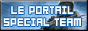
<style>
.page{position:relative;width:88px;height:31px}
.page>*{position:absolute;margin:0}
.t1{font:12.1px/12px "04b03b";color:#ffffff;scale:0.91 1}
</style>
<div class="page">
<p class="t1" style="left:3px;top:6px;width:78px;height:20px;text-align:center">LE PORTAIL<br>SPECIAL TEAM</p>
</div>
